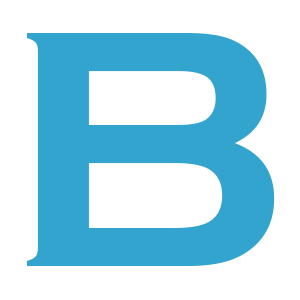
<style>
.page{position:relative;width:300px;height:300px;background:#ffffff}
.page>*{position:absolute;margin:0}
.t1{font:350px "CopperplateGothic-Bold";color:#32a4ce}
</style>
<div class="page">
<p class="t1" style="left:27px;top:33px;width:248px;height:233px">B</p>
</div>
